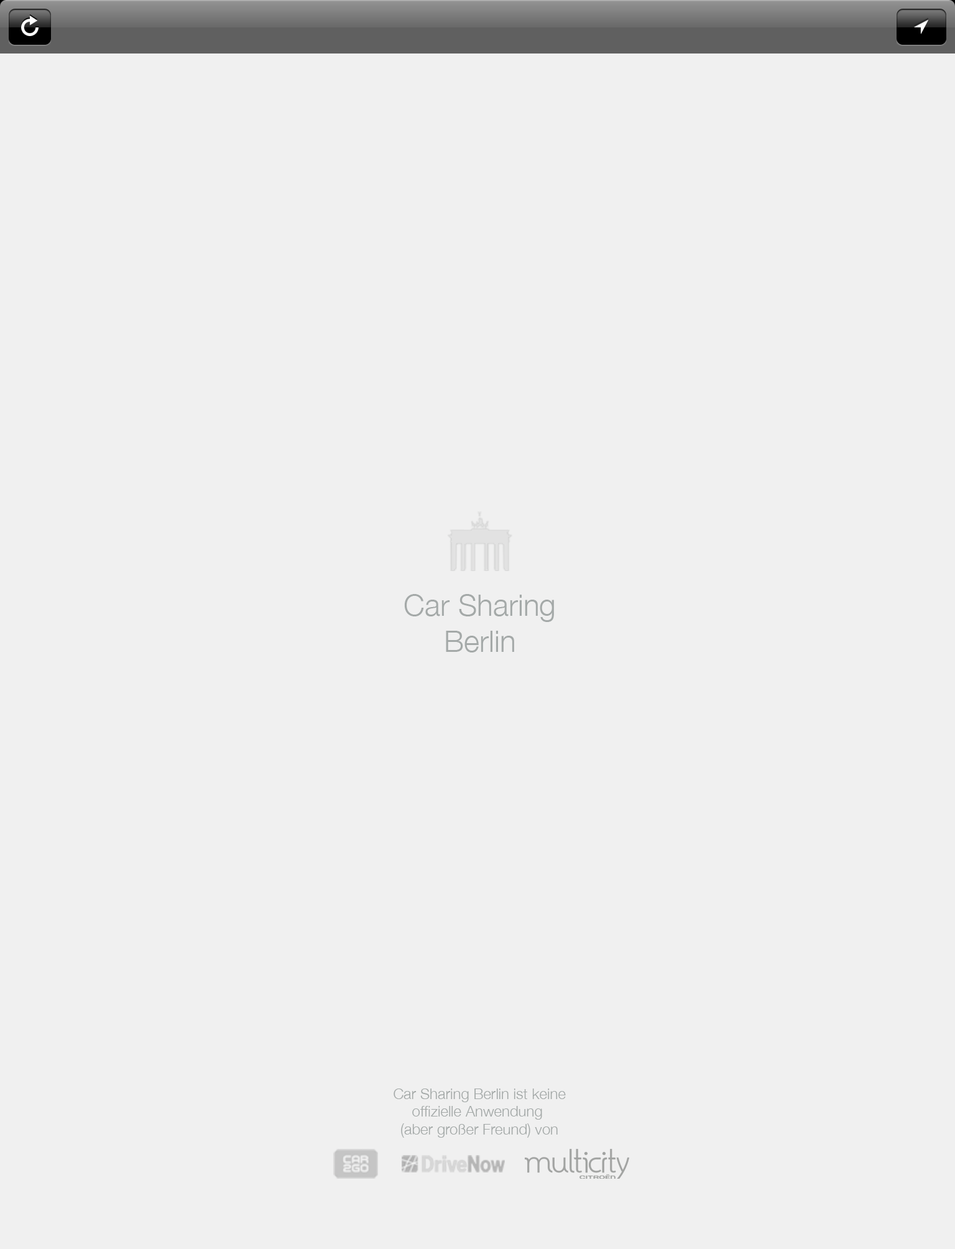
<style>
.page{position:relative;width:955px;height:1249px;background:#f0f0f0}
.page>*{position:absolute;margin:0}
.t1{font:29.8px "HelveticaNeue-Light";color:#a4a9a8}
.t2{font:14.9px "HelveticaNeue-Light";color:#a4a9a8}
</style>
<div class="page">
<p class="t1" style="left:404px;top:594px;width:150px;height:58px;text-align:center">Car Sharing<br>Berlin</p>
<p class="t2" style="left:394px;top:1088px;width:172px;height:49px;text-align:center">Car Sharing Berlin ist keine<br>offizielle Anwendung <br>(aber großer Freund) von</p>
</div>
